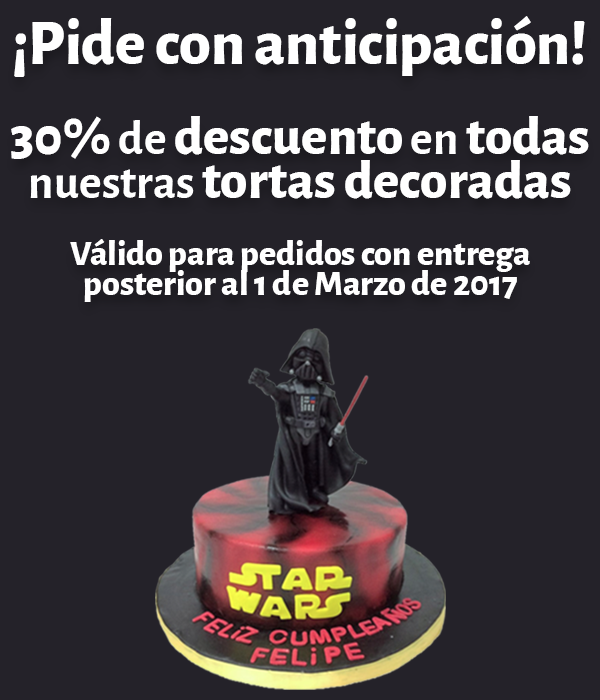
<style>
.page{position:relative;width:600px;height:700px;background:#242229}
.page>*{position:absolute;margin:0}
.t1{font:63.8px "AlegreyaSans-ExtraBold";color:#ffffff}
.t2{font:55.2px/44.1px "AlegreyaSans-ExtraBold";color:#ffffff}
.t3{font:55.2px/39.5px "AlegreyaSans-ExtraBold";color:#ffffff}
.t4{font:48.2px/39.5px "AlegreyaSans-Bold";color:#ffffff}
.t5{font:48.2px/44.1px "AlegreyaSans-Bold";color:#ffffff}
.t6{font:36px/42.9px "AlegreyaSans-ExtraBold";color:#ffffff}
.t7{font:36px/30px "AlegreyaSans-ExtraBold";color:#ffffff}
</style>
<div class="page">
<p class="t1" style="left:14px;top:16px;width:571px;height:61px">¡Pide con anticipación!</p>
<p class="t2" style="left:11px;top:116px;width:578px;height:83px;text-align:center"><span class="t3">30%</span><span class="t4"> de </span><span class="t3">descuento</span><span class="t4"> en </span><span class="t3">todas<br></span><span class="t5">nuestras </span>tortas decoradas</p>
<p class="t6" style="left:70px;top:239px;width:460px;height:63px;text-align:center">Válido para pedidos con entrega<br><span class="t7">posterior al 1 de Marzo de 2017</span></p>
</div>
